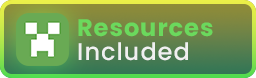
<style>
.page{position:relative;width:256px;height:78px}
.page>*{position:absolute;margin:0}
.t1{font:24px "Poppins-Bold";letter-spacing:0.04em;color:#6bd95d}
.t2{font:24px "Poppins-Medium";letter-spacing:0.04em;color:#f0f0f0}
</style>
<div class="page">
<p class="t1" style="left:78px;top:19px;width:135px;height:18px">Resources</p>
<p class="t2" style="left:78px;top:42px;width:110px;height:19px">Included</p>
</div>
